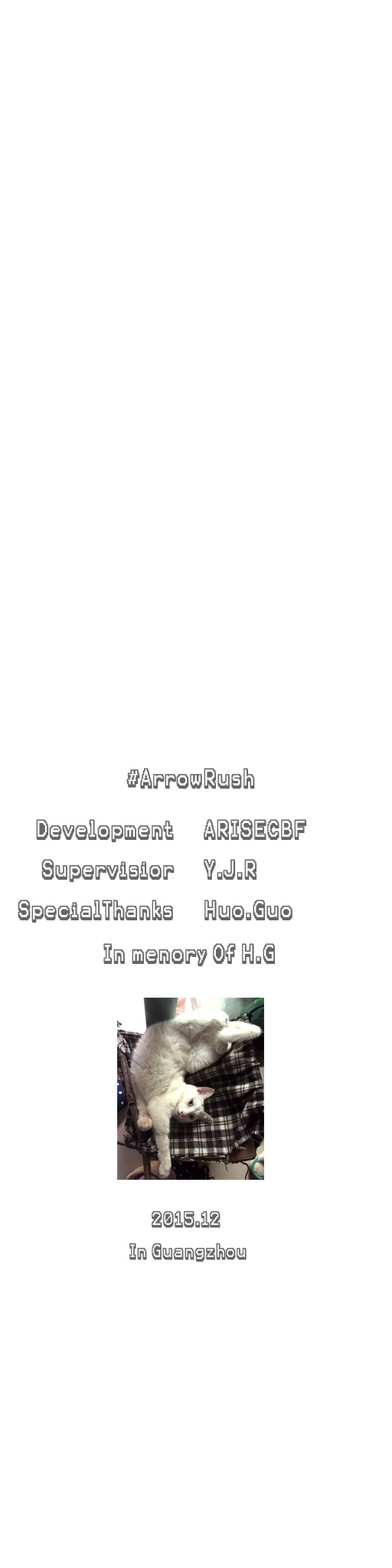
<style>
.page{position:relative;width:392px;height:1568px;background:#ffffff}
.page>*{position:absolute;margin:0}
.t1{font:23px "KarmaFuture-Regular";color:#656667}
.t2{font:18.4px "KarmaFuture-Regular";color:#656667}
</style>
<div class="page">
<p class="t1" style="left:126px;top:768px;width:129px;height:21px">#ArrowRush</p>
<p class="t1" style="left:18px;top:819px;width:157px;height:104px;text-align:right">Development<br>Supervisior<br>SpecialThanks</p>
<p class="t1" style="left:204px;top:819px;width:103px;height:102px">ARISECBF<br>Y.J.R<br>Huo.Guo</p>
<p class="t1" style="left:103px;top:943px;width:173px;height:24px">In menory Of H.G</p>
<p class="t2" style="left:129px;top:1210px;width:118px;height:52px;text-align:center">2015.12 <br>In Guangzhou</p>
</div>
